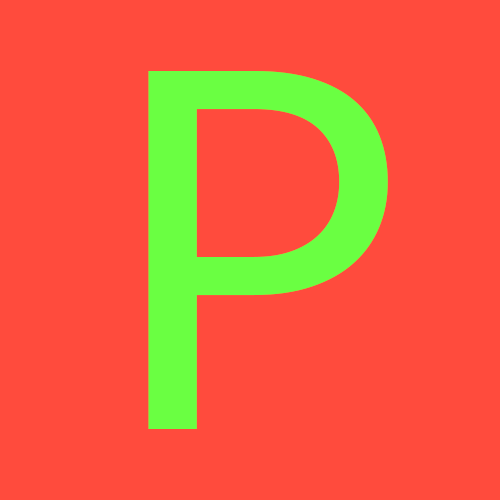
<style>
.page{position:relative;width:500px;height:500px;background:#ff4b3d}
.page>*{position:absolute;margin:0}
.t1{font:500px "Lato-Regular";color:#6aff42}
</style>
<div class="page">
<p class="t1" style="left:148px;top:71px;width:240px;height:358px">P</p>
</div>
